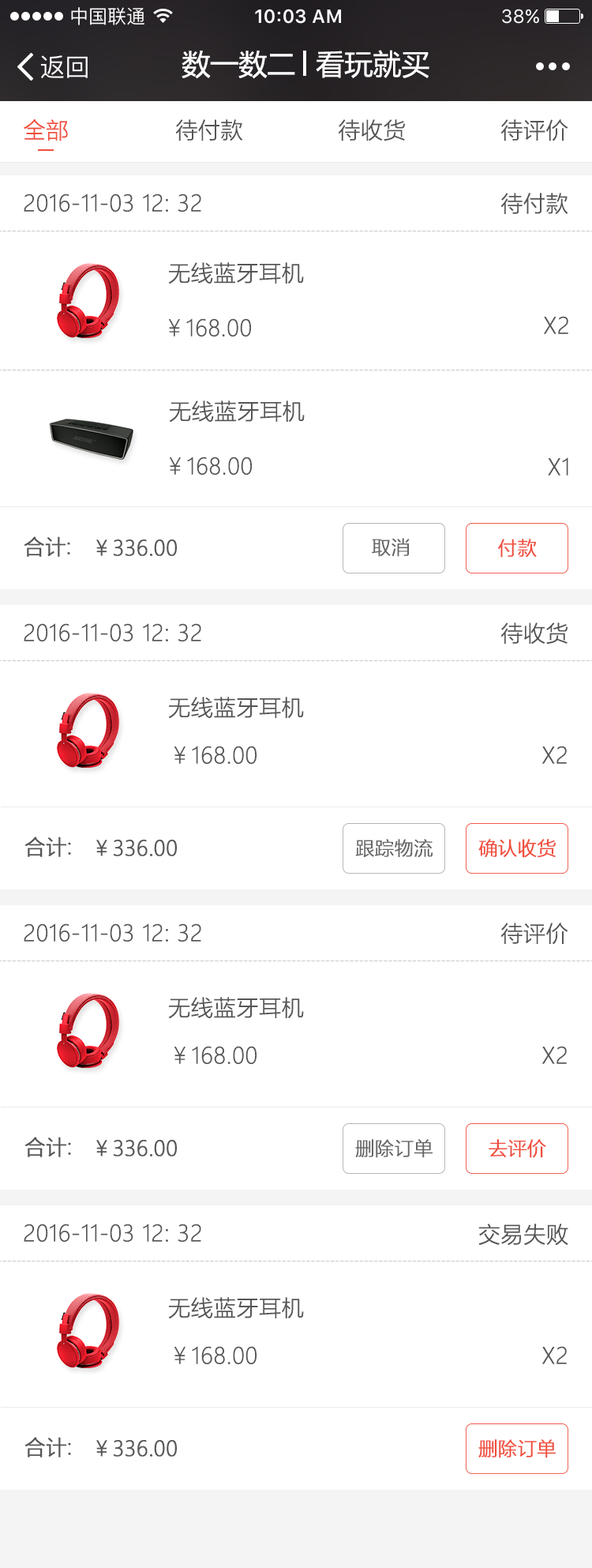
<style>
.page{position:relative;width:592px;height:1568px;background:#ffffff}
.page>*{position:absolute;margin:0}
.t1{font:28.4px "MicrosoftYaHei";color:#ffffff}
.t2{font:22.1px "MicrosoftYaHeiLight";color:#ef4f3e;font-weight:bold}
.t3{font:22.1px "MicrosoftYaHeiLight";color:#555555;font-weight:bold}
.t4{font:20.5px "MicrosoftYaHeiLight";color:#555555;font-weight:bold}
.t5{font:19px "MicrosoftYaHeiLight";color:#666666;font-weight:bold}
.t6{font:19px "MicrosoftYaHeiLight";color:#ef4f3e;font-weight:bold}
</style>
<div class="page">
<p class="t1" style="left:182px;top:50px;width:113px;height:29px">数一数二</p>
<p class="t1" style="left:316px;top:50px;width:114px;height:28px">看玩就买</p>
<p class="t2" style="left:24px;top:119px;width:44px;height:22px">全部</p>
<p class="t3" style="left:175px;top:119px;width:68px;height:22px">待付款</p>
<p class="t3" style="left:338px;top:119px;width:67px;height:22px">待收货</p>
<p class="t3" style="left:501px;top:119px;width:68px;height:22px">待评价</p>
<p class="t3" style="left:24px;top:194px;width:177px;height:18px">2016-11-03 12: 32</p>
<p class="t3" style="left:501px;top:193px;width:68px;height:22px">待付款</p>
<p class="t3" style="left:168px;top:262px;width:136px;height:22px">无线蓝牙耳机</p>
<p class="t3" style="left:544px;top:316px;width:25px;height:18px">X2</p>
<p class="t3" style="left:169px;top:318px;width:82px;height:19px">￥168.00</p>
<p class="t3" style="left:169px;top:400px;width:136px;height:23px">无线蓝牙耳机</p>
<p class="t3" style="left:170px;top:457px;width:82px;height:18px">￥168.00</p>
<p class="t3" style="left:548px;top:457px;width:21px;height:19px">X1</p>
<p class="t4" style="left:24px;top:536px;width:46px;height:21px">合计:</p>
<p class="t4" style="left:96px;top:539px;width:82px;height:17px">￥336.00</p>
<p class="t5" style="left:372px;top:538px;width:38px;height:19px">取消</p>
<p class="t6" style="left:498px;top:539px;width:39px;height:19px">付款</p>
<p class="t3" style="left:24px;top:623px;width:177px;height:18px">2016-11-03 12: 32</p>
<p class="t3" style="left:501px;top:622px;width:67px;height:23px">待收货</p>
<p class="t3" style="left:168px;top:697px;width:136px;height:22px">无线蓝牙耳机</p>
<p class="t3" style="left:175px;top:746px;width:82px;height:18px">￥168.00</p>
<p class="t3" style="left:543px;top:746px;width:24px;height:18px">X2</p>
<p class="t4" style="left:24px;top:837px;width:47px;height:20px">合计:</p>
<p class="t4" style="left:96px;top:839px;width:82px;height:17px">￥336.00</p>
<p class="t5" style="left:355px;top:839px;width:79px;height:19px">跟踪物流</p>
<p class="t6" style="left:479px;top:839px;width:78px;height:19px">确认收货</p>
<p class="t3" style="left:24px;top:923px;width:177px;height:19px">2016-11-03 12: 32</p>
<p class="t3" style="left:501px;top:923px;width:68px;height:22px">待评价</p>
<p class="t3" style="left:168px;top:997px;width:136px;height:22px">无线蓝牙耳机</p>
<p class="t3" style="left:175px;top:1046px;width:82px;height:18px">￥168.00</p>
<p class="t3" style="left:543px;top:1046px;width:24px;height:18px">X2</p>
<p class="t4" style="left:24px;top:1137px;width:47px;height:20px">合计:</p>
<p class="t4" style="left:96px;top:1139px;width:82px;height:17px">￥336.00</p>
<p class="t5" style="left:355px;top:1139px;width:78px;height:19px">删除订单</p>
<p class="t6" style="left:489px;top:1139px;width:58px;height:19px">去评价</p>
<p class="t3" style="left:24px;top:1224px;width:177px;height:18px">2016-11-03 12: 32</p>
<p class="t3" style="left:479px;top:1224px;width:90px;height:22px">交易失败</p>
<p class="t3" style="left:168px;top:1297px;width:136px;height:22px">无线蓝牙耳机</p>
<p class="t3" style="left:175px;top:1346px;width:82px;height:18px">￥168.00</p>
<p class="t3" style="left:543px;top:1346px;width:24px;height:18px">X2</p>
<p class="t4" style="left:24px;top:1437px;width:47px;height:20px">合计:</p>
<p class="t4" style="left:96px;top:1439px;width:82px;height:18px">￥336.00</p>
<p class="t6" style="left:479px;top:1439px;width:78px;height:19px">删除订单</p>
</div>
